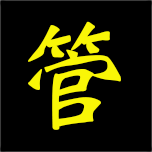
<style>
.page{position:relative;width:152px;height:152px;background:#000000}
.page>*{position:absolute;margin:0}
.t1{font:125.3px "Weibei-SC-Bold";color:#f9f607}
</style>
<div class="page">
<p class="t1" style="left:28px;top:21px;width:93px;height:109px">管</p>
</div>
